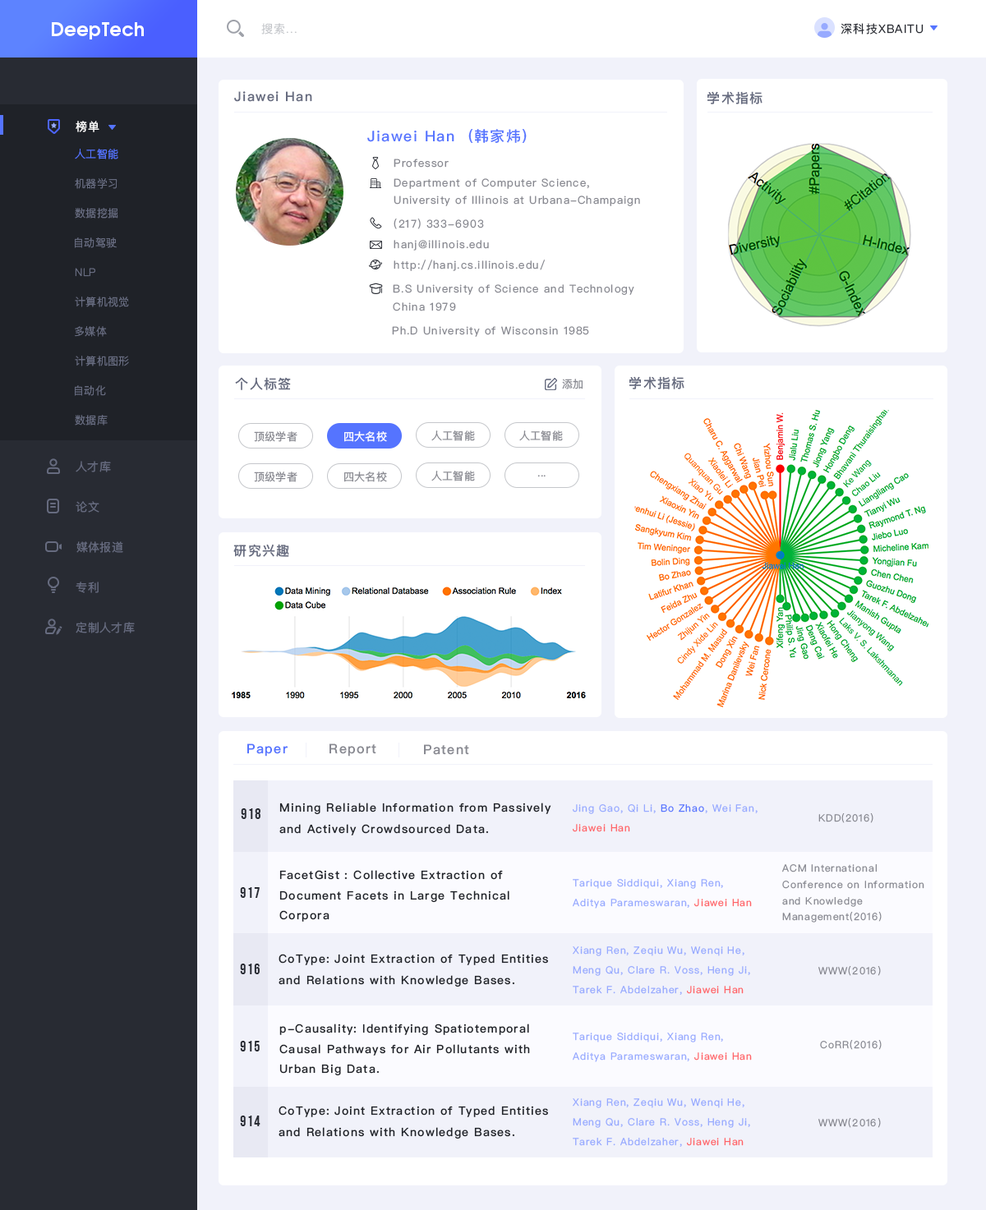
<style>
.page{position:relative;width:986px;height:1210px;background:#ffffff}
.page>*{position:absolute;margin:0}
.t1{font:18.6px "AvantGardeGothicC-Demi";letter-spacing:0.02em;color:#ffffff}
.t2{font:11.5px "PingFangSC-Light";letter-spacing:0.08em;color:#c5c7cb}
.t3{font:11.5px "PingFangSC-Regular";letter-spacing:0.08em;color:#282b33}
.t4{font:13.1px "PingFangSC-Medium";letter-spacing:0.08em;color:#666b7f}
.t5{font:11.5px "PingFangSC-Regular";letter-spacing:0.03em;color:#ffffff}
.t6{font:14.8px "PingFangSC-Medium";letter-spacing:0.08em;color:#5574ff}
.t7{font:10.7px "PingFangSC-Light";letter-spacing:0.02em;color:#5574ff}
.t8{font:10.7px/17.2px "PingFangSC-Regular";letter-spacing:0.08em;color:#888991}
.t9{font:10.7px/19.7px "PingFangSC-Regular";letter-spacing:0.08em;color:#888991}
.t10{font:10.7px "PingFangSC-Light";letter-spacing:0.02em;color:#666b7f}
.t11{font:10.7px/20.5px "PingFangSC-Regular";letter-spacing:0.08em;color:#888991}
.t12{font:10.7px/18.1px "PingFangSC-Regular";letter-spacing:0.08em;color:#888991}
.t13{font:10.7px "PingFangSC-Regular";letter-spacing:0.08em;color:#888991}
.t14{font:10.7px "PingFangSC-Regular";letter-spacing:0.02em;color:#888991}
.t15{font:10.7px "PingFangSC-Regular";letter-spacing:0.02em;color:#ffffff}
.t16{font:11.5px "PingFangSC-Regular";letter-spacing:0.03em;color:#666b7f}
.t17{font:13.1px "PingFangSC-Medium";letter-spacing:0.08em;color:#5574ff}
.t18{font:13.1px "PingFangSC-Medium";letter-spacing:0.08em;color:#888991}
.t19{font:14.8px "BebasNeueBold";letter-spacing:0.08em;color:#282b33}
.t20{font:11.5px/21px "PingFangSC-Medium";letter-spacing:0.08em;color:#1f2228}
.t21{font:9.9px/19.4px "PingFangSC-Regular";letter-spacing:0.08em;color:#97aaff}
.t22{font:9.9px/19.4px "PingFangSC-Regular";letter-spacing:0.08em;color:#5574ff}
.t23{font:9.9px/19.4px "PingFangSC-Regular";letter-spacing:0.08em;color:#ff6367}
.t24{font:9.9px "PingFangSC-Regular";letter-spacing:0.08em;color:#888991}
.t25{font:11.5px/20.2px "PingFangSC-Medium";letter-spacing:0.08em;color:#1f2228}
.t26{font:9.9px/16.1px "PingFangSC-Regular";letter-spacing:0.08em;color:#888991}
</style>
<div class="page">
<p class="t1" style="left:52px;top:22px;width:92px;height:17px">DeepTech</p>
<p class="t2" style="left:261px;top:23px;width:36px;height:11px">搜索...</p>
<p class="t3" style="left:840px;top:23px;width:83px;height:11px">深科技XBAITU</p>
<p class="t4" style="left:234px;top:91px;width:78px;height:11px">Jiawei Han</p>
<p class="t4" style="left:707px;top:91px;width:55px;height:13px">学术指标</p>
<p class="t5" style="left:76px;top:121px;width:23px;height:11px">榜单</p>
<p class="t6" style="left:367px;top:129px;width:159px;height:14px">Jiawei Han  (韩家炜)</p>
<p class="t7" style="left:75px;top:149px;width:43px;height:10px">人工智能</p>
<p class="t8" style="left:393px;top:159px;width:247px;height:47px;text-align:right"><span class="t9">Professor<br></span>Department of Computer Science,<br>University of Illinois at Urbana-Champaign</p>
<p class="t10" style="left:75px;top:178px;width:42px;height:11px">机器学习</p>
<p class="t10" style="left:75px;top:208px;width:43px;height:10px">数据挖掘</p>
<p class="t11" style="left:393px;top:218px;width:152px;height:53px;text-align:right">(217) 333-6903<br>hanj@illinois.edu<br>http://hanj.cs.illinois.edu/</p>
<p class="t10" style="left:75px;top:237px;width:42px;height:11px">自动驾驶</p>
<p class="t10" style="left:75px;top:268px;width:20px;height:9px">NLP</p>
<p class="t12" style="left:393px;top:284px;width:241px;height:27px;text-align:right">B.S University of Science and Technology<br>China 1979</p>
<p class="t10" style="left:75px;top:297px;width:54px;height:10px">计算机视觉</p>
<p class="t10" style="left:75px;top:326px;width:32px;height:11px">多媒体</p>
<p class="t13" style="left:392px;top:326px;width:197px;height:11px">Ph.D University of Wisconsin 1985</p>
<p class="t10" style="left:75px;top:356px;width:54px;height:10px">计算机图形</p>
<p class="t4" style="left:235px;top:377px;width:56px;height:13px">个人标签</p>
<p class="t4" style="left:629px;top:376px;width:55px;height:13px">学术指标</p>
<p class="t10" style="left:75px;top:385px;width:31px;height:11px">自动化</p>
<p class="t14" style="left:562px;top:379px;width:20px;height:10px">添加</p>
<p class="t10" style="left:75px;top:415px;width:33px;height:10px">数据库</p>
<p class="t14" style="left:254px;top:431px;width:43px;height:11px">顶级学者</p>
<p class="t15" style="left:344px;top:431px;width:43px;height:11px">四大名校</p>
<p class="t14" style="left:431px;top:430px;width:44px;height:11px">人工智能</p>
<p class="t14" style="left:519px;top:430px;width:44px;height:11px">人工智能</p>
<p class="t16" style="left:76px;top:461px;width:35px;height:11px">人才库</p>
<p class="t14" style="left:254px;top:471px;width:43px;height:11px">顶级学者</p>
<p class="t14" style="left:344px;top:471px;width:43px;height:11px">四大名校</p>
<p class="t14" style="left:431px;top:471px;width:44px;height:10px">人工智能</p>
<p class="t14" style="left:537px;top:475px;width:8px;height:2px">...</p>
<p class="t16" style="left:76px;top:501px;width:23px;height:12px">论文</p>
<p class="t16" style="left:76px;top:541px;width:47px;height:12px">媒体报道</p>
<p class="t4" style="left:233px;top:544px;width:56px;height:13px">研究兴趣</p>
<p class="t16" style="left:76px;top:582px;width:23px;height:11px">专利</p>
<p class="t16" style="left:76px;top:622px;width:59px;height:11px">定制人才库</p>
<p class="t17" style="left:247px;top:743px;width:40px;height:13px">Paper</p>
<p class="t18" style="left:329px;top:743px;width:47px;height:13px">Report</p>
<p class="t18" style="left:424px;top:744px;width:45px;height:11px">Patent</p>
<p class="t19" style="left:241px;top:808px;width:19px;height:11px">918</p>
<p class="t20" style="left:279px;top:802px;width:272px;height:33px;text-align:right">Mining Reliable Information from Passively and Actively Crowdsourced Data.</p>
<p class="t21" style="left:572px;top:804px;width:185px;height:28px;text-align:right">Jing Gao, Qi Li, <span class="t22">Bo Zhao</span>, Wei Fan,<span class="t23"> Jiawei Han</span></p>
<p class="t24" style="left:818px;top:813px;width:55px;height:10px">KDD(2016)</p>
<p class="t25" style="left:279px;top:870px;width:230px;height:52px;text-align:right">FacetGist : Collective Extraction of Document Facets in Large Technical Corpora</p>
<p class="t26" style="left:782px;top:864px;width:142px;height:58px;text-align:right">ACM International Conference on Information and Knowledge Management(2016)</p>
<p class="t21" style="left:572px;top:879px;width:180px;height:29px;text-align:right">Tarique Siddiqui, Xiang Ren, Aditya Parameswaran, <span class="t23">Jiawei Han</span></p>
<p class="t19" style="left:240px;top:887px;width:20px;height:11px">917</p>
<p class="t20" style="left:278px;top:954px;width:270px;height:33px;text-align:right">CoType: Joint Extraction of Typed Entities and Relations with Knowledge Bases.</p>
<p class="t21" style="left:572px;top:946px;width:178px;height:49px;text-align:right">Xiang Ren, Zeqiu Wu, Wenqi He, Meng Qu, Clare R. Voss, Heng Ji, Tarek F. Abdelzaher, <span class="t23">Jiawei Han</span></p>
<p class="t19" style="left:240px;top:963px;width:20px;height:11px">916</p>
<p class="t24" style="left:818px;top:966px;width:62px;height:10px">WWW(2016)</p>
<p class="t25" style="left:279px;top:1023px;width:251px;height:53px;text-align:right">p-Causality: Identifying Spatiotemporal Causal Pathways for Air Pollutants with Urban Big Data.</p>
<p class="t21" style="left:572px;top:1032px;width:180px;height:30px;text-align:right">Tarique Siddiqui, Xiang Ren, Aditya Parameswaran, <span class="t23">Jiawei Han</span></p>
<p class="t19" style="left:240px;top:1041px;width:20px;height:10px">915</p>
<p class="t24" style="left:820px;top:1040px;width:61px;height:10px">CoRR(2016)</p>
<p class="t20" style="left:278px;top:1106px;width:270px;height:33px;text-align:right">CoType: Joint Extraction of Typed Entities and Relations with Knowledge Bases.</p>
<p class="t21" style="left:572px;top:1098px;width:178px;height:49px;text-align:right">Xiang Ren, Zeqiu Wu, Wenqi He, Meng Qu, Clare R. Voss, Heng Ji, Tarek F. Abdelzaher, <span class="t23">Jiawei Han</span></p>
<p class="t19" style="left:240px;top:1115px;width:20px;height:11px">914</p>
<p class="t24" style="left:818px;top:1118px;width:62px;height:10px">WWW(2016)</p>
</div>
